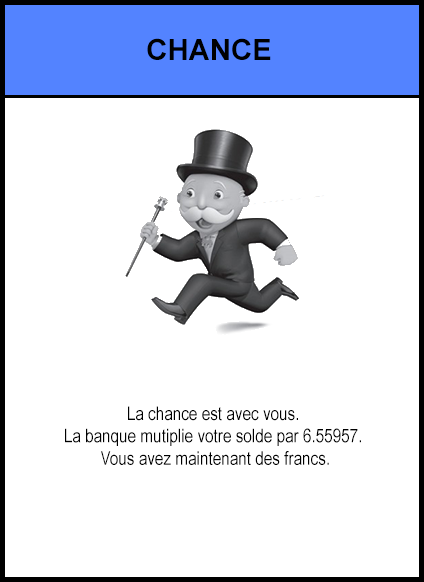
<style>
.page{position:relative;width:424px;height:582px;background:#ffffff}
.page>*{position:absolute;margin:0}
.t1{font:29.3px "Arial-BoldMT";color:#000000}
.t2{font:18.7px "ArialNarrow";color:#000000}
</style>
<div class="page">
<p class="t1" style="left:147px;top:38px;width:124px;height:22px">CHANCE</p>
<p class="t2" style="left:65px;top:406px;width:296px;height:59px;text-align:center">La chance est avec vous.<br>La banque mutiplie votre solde par 6.55957.<br> Vous avez maintenant des francs.</p>
</div>
